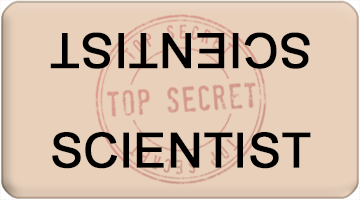
<style>
.page{position:relative;width:360px;height:200px;background:#e8d0bb}
.page>*{position:absolute;margin:0}
.t1{font:48px "ArialMT";color:#000000;font-weight:bold}
</style>
<div class="page">
<p class="t1" style="left:50px;top:32px;width:260px;height:37px;rotate:180deg">SCIENTIST</p>
<p class="t1" style="left:52px;top:132px;width:259px;height:37px">SCIENTIST</p>
</div>
